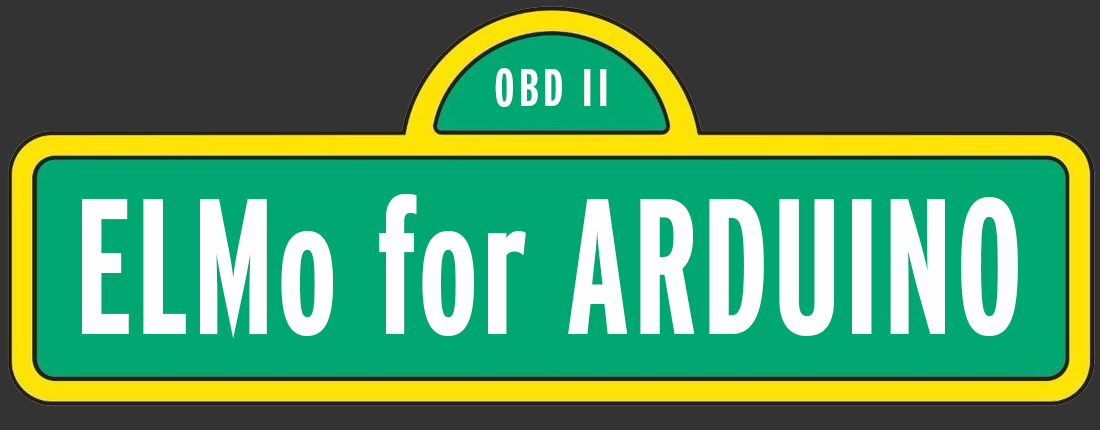
<style>
.page{position:relative;width:1100px;height:430px;background:#00a771}
.page>*{position:absolute;margin:0}
.t1{font:53.3px "Interstate-BoldCompressed";letter-spacing:0.08em;color:#fefefe}
.t2{font:193.1px "Interstate-BoldCompressed";letter-spacing:0.02em;color:#fefefe;scale:0.89 1}
</style>
<div class="page">
<p class="t1" style="left:495px;top:68px;width:112px;height:39px">OBD II</p>
<p class="t2" style="left:82px;top:194px;width:936px;height:144px">ELMo for ARDUINO</p>
</div>
